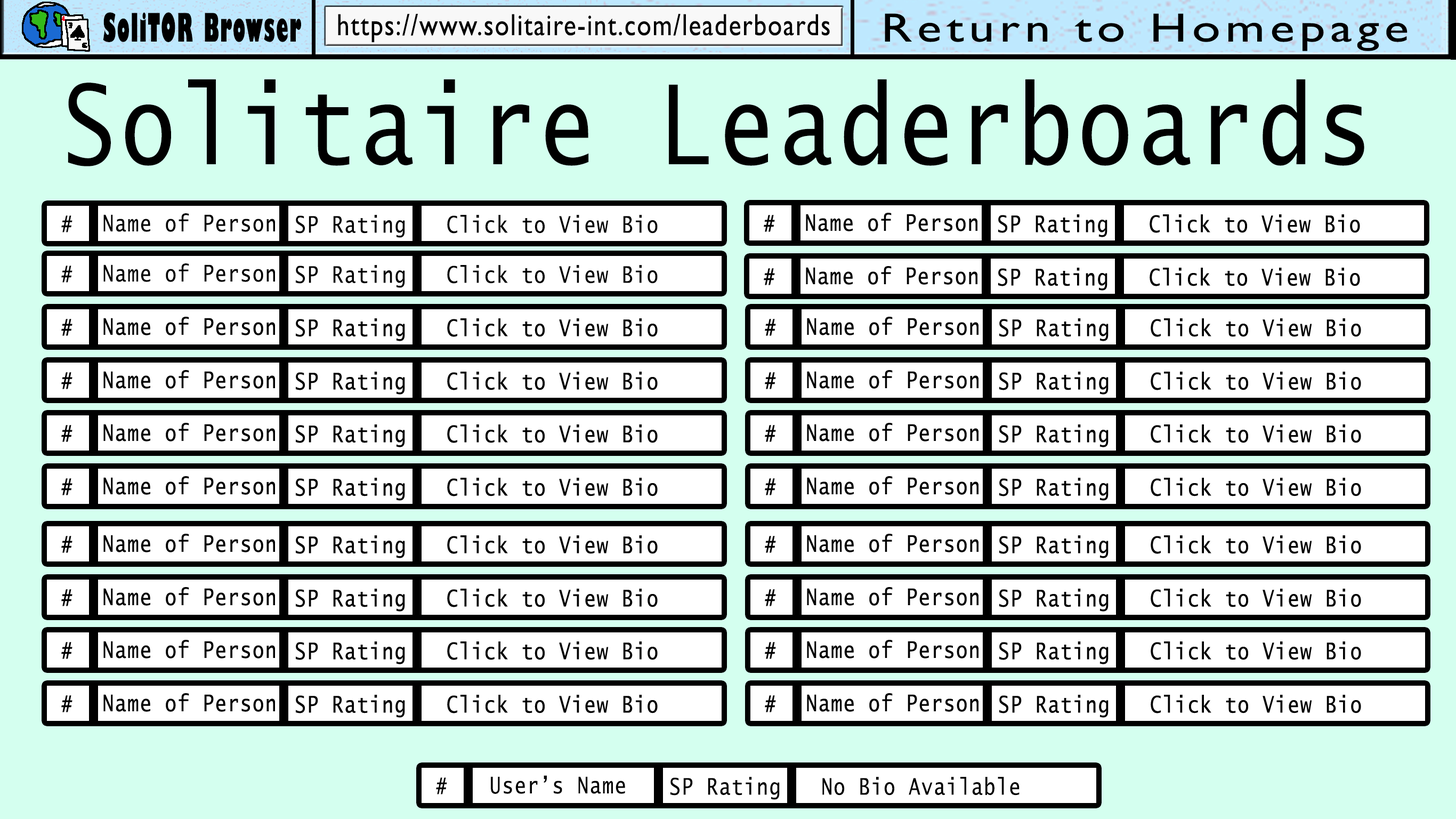
<style>
.page{position:relative;width:1456px;height:819px;background:#ffffff}
.page>*{position:absolute;margin:0}
.t1{font:38.4px "GillSans-UltraBoldCondensed";letter-spacing:0.05em;color:#000000;scale:0.67 1}
.t2{font:30.7px "GillSansMT";letter-spacing:0.05em;color:#000000;scale:0.83 1}
.t3{font:40.9px "GillSansMT";letter-spacing:0.1em;color:#000000;scale:1.25 1}
.t4{font:110px "LucidaSans-Typewriter";letter-spacing:0.05em;color:#000000;scale:0.83 1}
.t5{font:23px "LucidaSans-Typewriter";letter-spacing:0.05em;color:#000000;scale:0.83 1}
</style>
<div class="page">
<p class="t1" style="left:103px;top:12px;width:198px;height:30px">SoliTOR Browser</p>
<p class="t2" style="left:338px;top:14px;width:492px;height:29px">https://www.solitaire-int.com/leaderboards</p>
<p class="t3" style="left:885px;top:13px;width:523px;height:38px">Return to Homepage</p>
<p class="t4" style="left:68px;top:79px;width:1297px;height:87px">Solitaire Leaderboards</p>
<p class="t5" style="left:61px;top:215px;width:11px;height:17px">#</p>
<p class="t5" style="left:103px;top:213px;width:172px;height:19px">Name of Person</p>
<p class="t5" style="left:296px;top:215px;width:109px;height:23px">SP Rating</p>
<p class="t5" style="left:447px;top:215px;width:211px;height:18px">Click to View Bio</p>
<p class="t5" style="left:61px;top:265px;width:11px;height:18px">#</p>
<p class="t5" style="left:103px;top:263px;width:172px;height:19px">Name of Person</p>
<p class="t5" style="left:296px;top:265px;width:109px;height:23px">SP Rating</p>
<p class="t5" style="left:447px;top:265px;width:211px;height:19px">Click to View Bio</p>
<p class="t5" style="left:436px;top:777px;width:11px;height:17px">#</p>
<p class="t5" style="left:491px;top:775px;width:134px;height:19px">User’s Name</p>
<p class="t5" style="left:671px;top:777px;width:109px;height:23px">SP Rating</p>
<p class="t5" style="left:823px;top:777px;width:197px;height:18px">No Bio Available</p>
</div>
